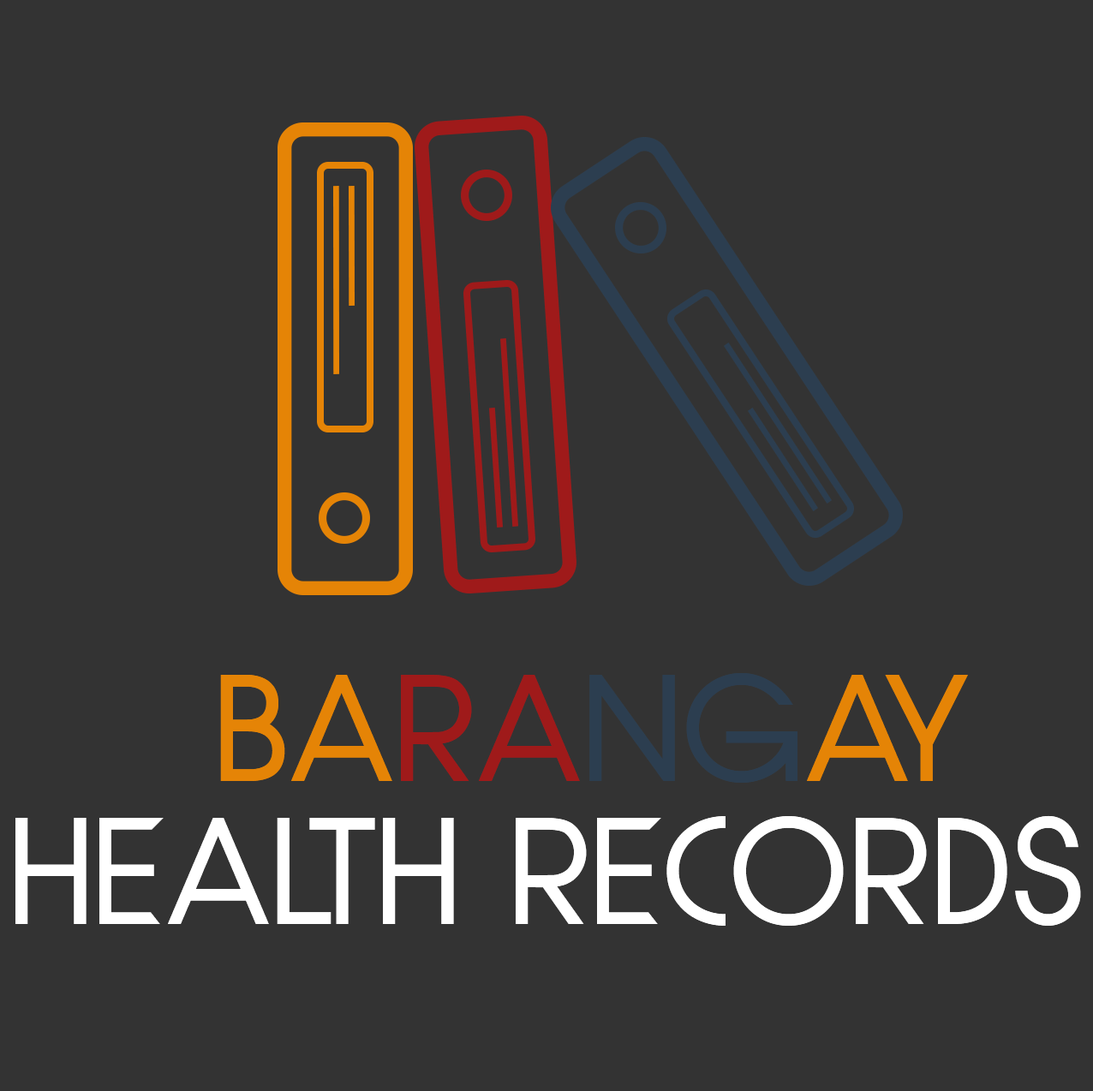
<style>
.page{position:relative;width:1093px;height:1091px;background:#333333}
.page>*{position:absolute;margin:0}
.t1{font:142.7px "Quinfo-Bold";letter-spacing:0.03em;color:#e58406}
.t2{font:142.7px "Quinfo-Bold";letter-spacing:0.03em;color:#9f1a1a}
.t3{font:142.7px "Quinfo-Bold";letter-spacing:0.03em;color:#2c3e50}
.t4{font:142.7px "Quinfo-Bold";letter-spacing:0.03em;color:#ffffff}
</style>
<div class="page">
<p class="t1" style="left:220px;top:673px;width:748px;height:110px">BA<span class="t2">RA</span><span class="t3">NG</span>AY</p>
<p class="t4" style="left:15px;top:815px;width:1066px;height:111px">HEALTH RECORDS</p>
</div>
